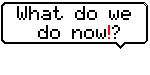
<style>
.page{position:relative;width:150px;height:75px;background:#ffffff}
.page>*{position:absolute;margin:0}
.t1{font:16px "pixelmix";color:#000000}
.t2{font:16px "pixelmix";color:#f80808}
</style>
<div class="page">
<p class="t1" style="left:17px;top:6px;width:114px;height:33px;text-align:center">What do we<br> do now<span class="t2">!</span>?</p>
</div>
